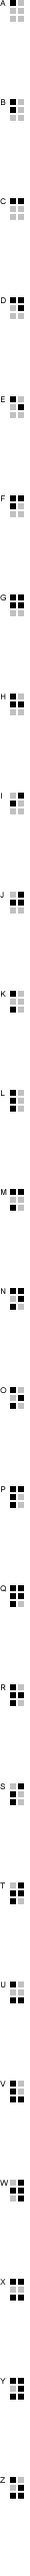
<style>
.page{position:relative;width:30px;height:2576px;background:#ffffff}
.page>*{position:absolute;margin:0}
.t1{font:7.9px/99.1px "ArialMT";color:#000000}
</style>
<div class="page">
<p class="t1" style="left:0px;top:0px;width:8px;height:2483px">A<br>B<br>C<br>D<br>E<br>F<br>G<br>H<br>I<br>J<br>K<br>L<br>M<br>N<br>O<br>P<br>Q<br>R<br>S<br>T<br>U<br>V<br>W<br>X<br>Y<br>Z</p>
</div>
